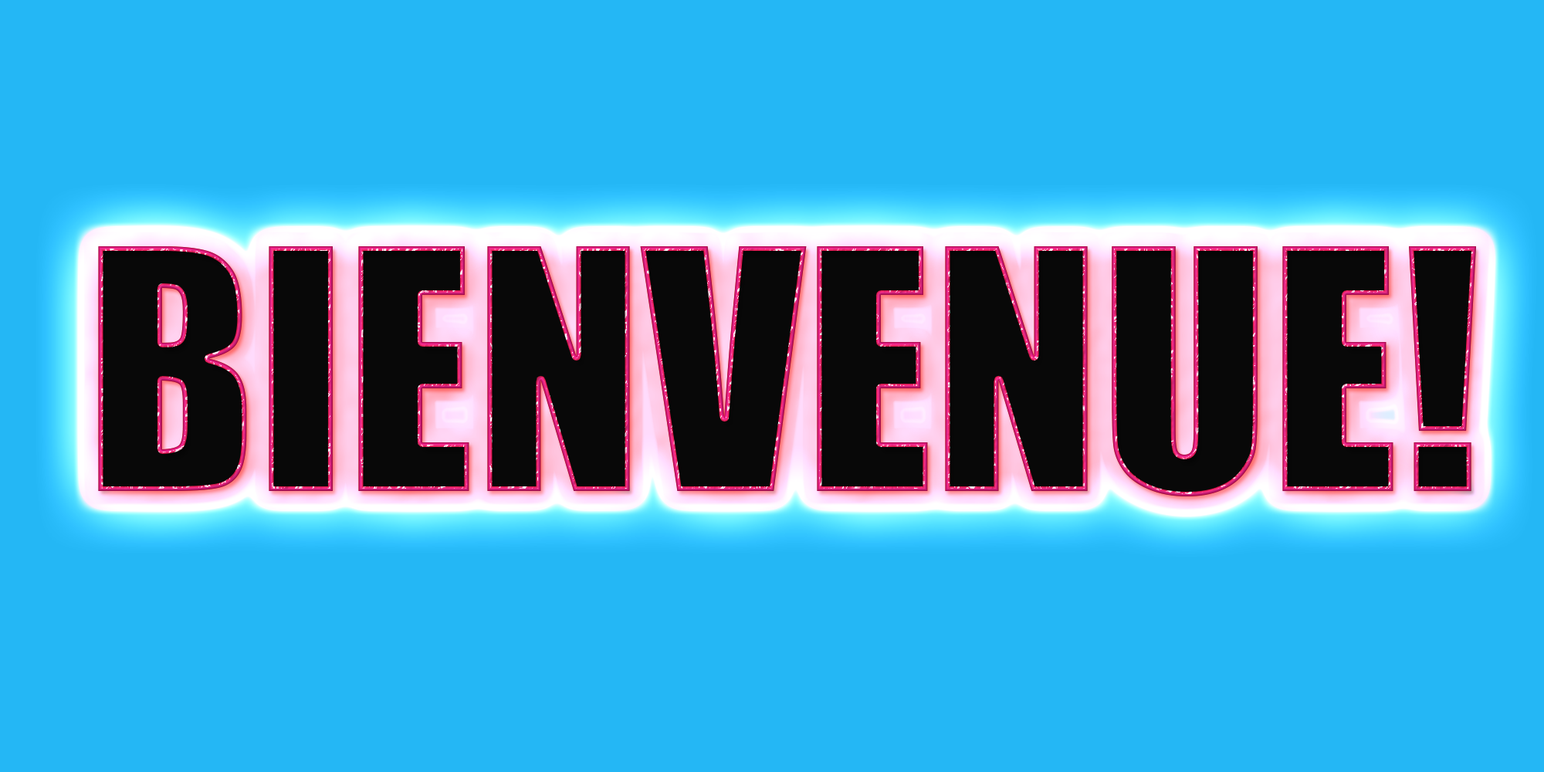
<style>
.page{position:relative;width:1544px;height:772px;background:#24b7f5}
.page>*{position:absolute;margin:0}
.t1{font:309.6px "Impact";color:#080808}
</style>
<div class="page">
<p class="t1" style="left:98px;top:246px;width:1379px;height:250px">BIENVENUE!</p>
<p class="t1" style="left:98px;top:246px;width:1379px;height:250px">BIENVENUE!</p>
</div>
